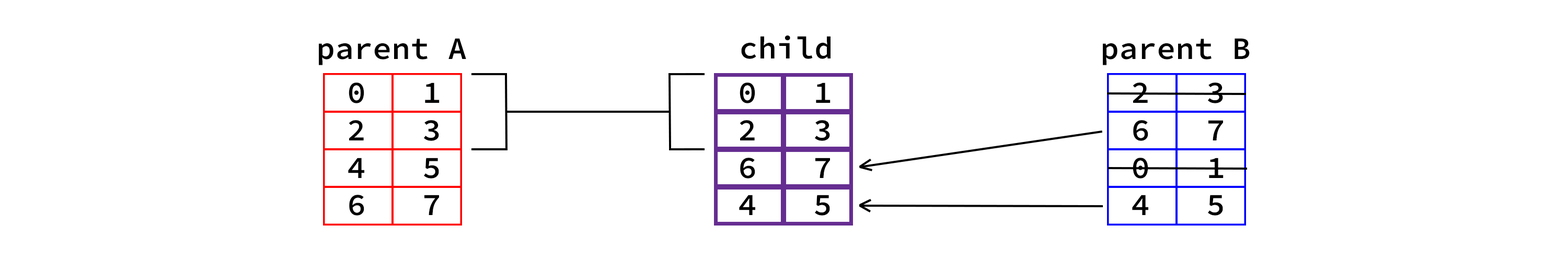
<style>
.page{position:relative;width:1568px;height:261px;background:#ffffff}
.page>*{position:absolute;margin:0}
.t1{font:31.3px "SourceCodeRoman-Semibold";color:#000000}
</style>
<div class="page">
<p class="t1" style="left:319px;top:38px;width:147px;height:27px">parent A</p>
<p class="t1" style="left:741px;top:35px;width:90px;height:24px">child</p>
<p class="t1" style="left:1103px;top:38px;width:147px;height:27px">parent B</p>
<p class="t1" style="left:348px;top:83px;width:92px;height:133px;text-align:center">0   1<br>2   3<br>4   5<br>6   7</p>
<p class="t1" style="left:739px;top:83px;width:92px;height:133px;text-align:center">0   1<br>2   3<br>6   7<br>4   5</p>
<p class="t1" style="left:1132px;top:83px;width:92px;height:133px;text-align:center">2   3<br>6   7<br>0   1<br>4   5</p>
</div>
